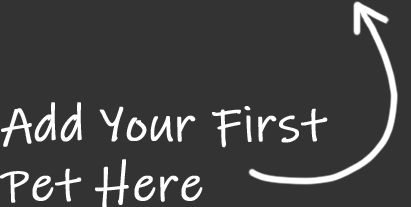
<style>
.page{position:relative;width:411px;height:207px;background:#333333}
.page>*{position:absolute;margin:0}
.t1{font:50px "InkFree";color:#ffffff;font-weight:bold}
</style>
<div class="page">
<p class="t1" style="left:0px;top:102px;width:328px;height:106px">Add Your First <br>Pet Here</p>
</div>
